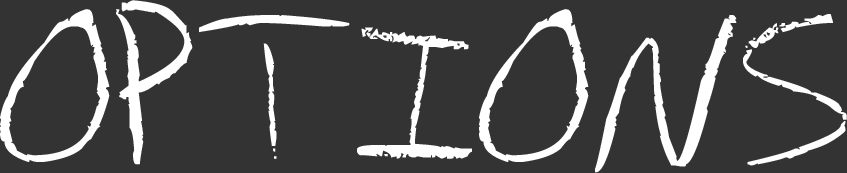
<style>
.page{position:relative;width:847px;height:173px;background:#333333}
.page>*{position:absolute;margin:0}
.t1{font:100px "chalkboard";color:#ffffff}
</style>
<div class="page">
<p class="t1" style="left:0px;top:0px;width:847px;height:173px">OPTIONS</p>
</div>
